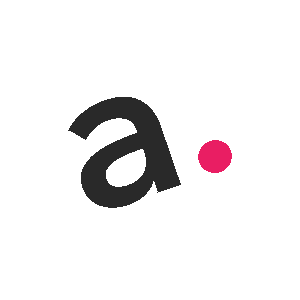
<style>
.page{position:relative;width:300px;height:300px;background:#ffffff}
.page>*{position:absolute;margin:0}
.t1{font:212px "AvenirNext-DemiBold";color:#292929}
.t2{font:212px "AvenirNext-DemiBold";color:#e91e63}
</style>
<div class="page">
<p class="t1" style="left:68px;top:97px;width:164px;height:111px;rotate:-19deg">a<span class="t2">.</span></p>
</div>
